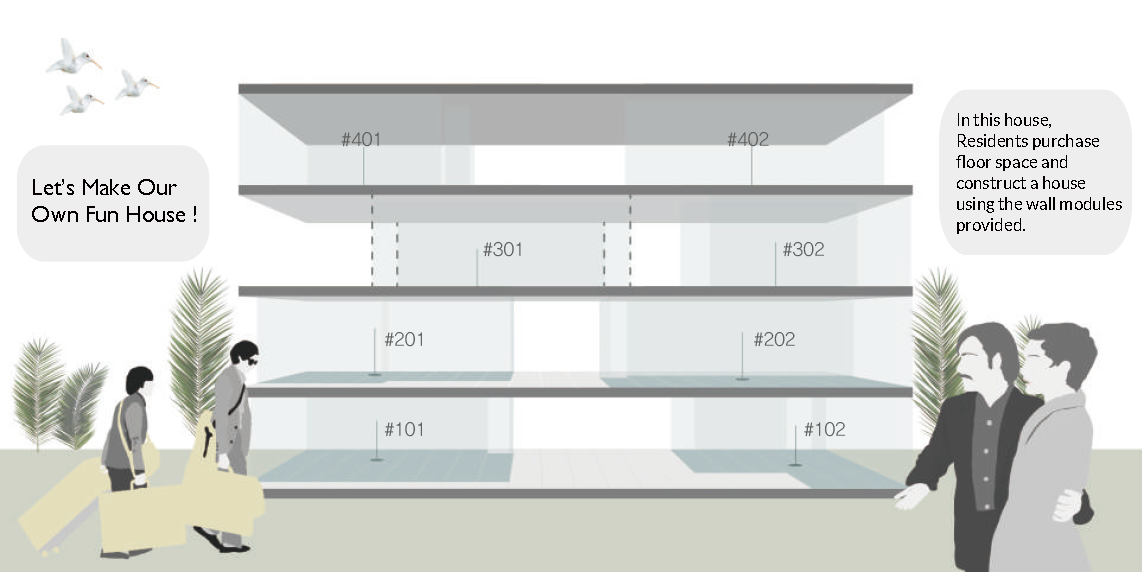
<style>
.page{position:relative;width:1142px;height:572px;background:#ffffff}
.page>*{position:absolute;margin:0}
.t1{font:17.5px "Lato-Regular";color:#040000}
.t2{font:23.1px "GillSansMT";color:#040000}
</style>
<div class="page">
<p class="t1" style="left:956px;top:113px;width:166px;height:121px">In this house,<br>Residents purchase<br>floor space and<br>construct a house<br>using the wall modules<br>provided.</p>
<p class="t2" style="left:32px;top:179px;width:164px;height:43px">Let’s Make Our<br>Own Fun House !</p>
</div>
